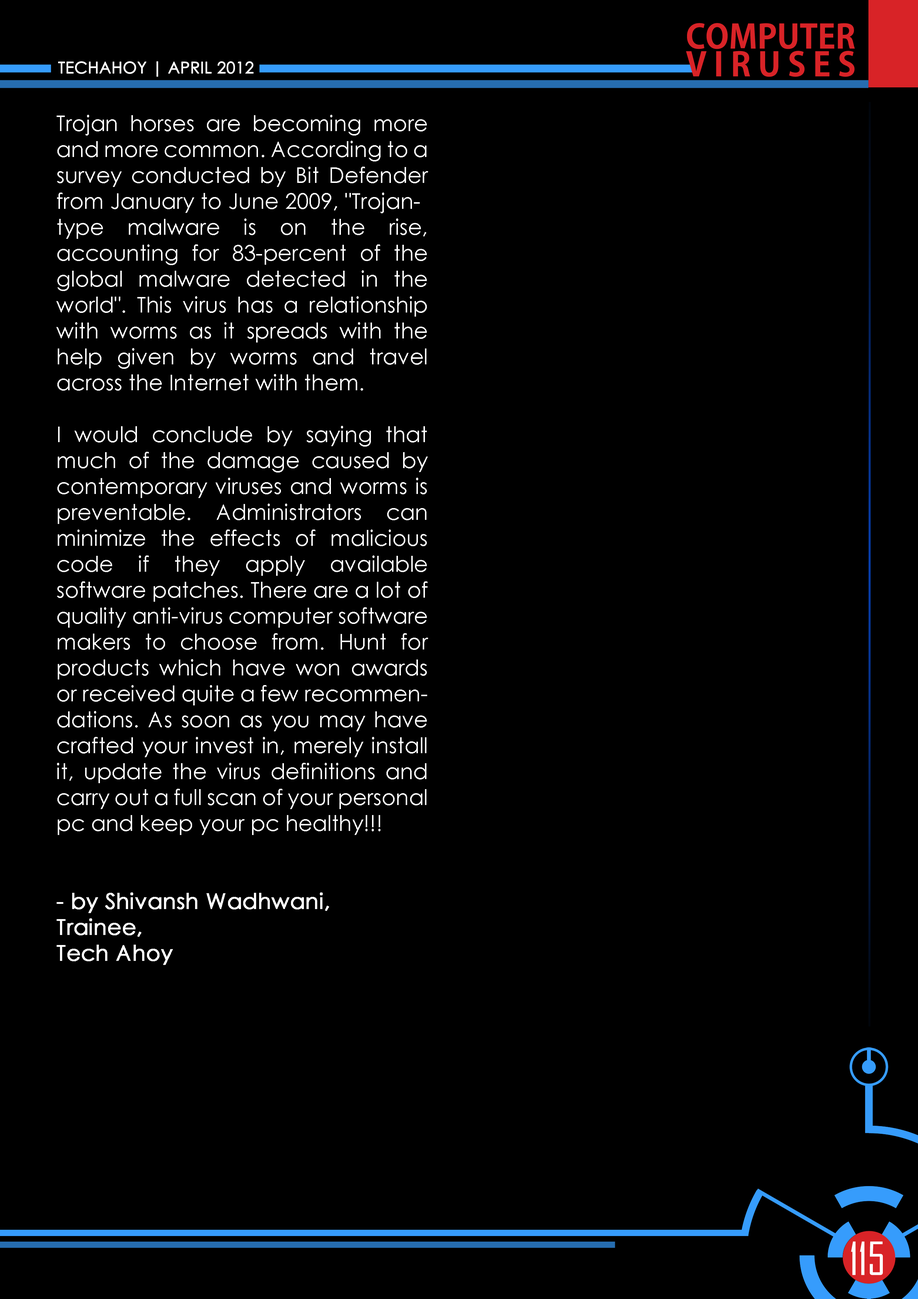
<style>
.page{position:relative;width:918px;height:1299px;background:#000000}
.page>*{position:absolute;margin:0}
.t1{font:32.6px/27.8px "AdobeGothicStd-Bold";color:#d82327;text-transform:uppercase}
.t2{font:32.6px/27.8px "AdobeGothicStd-Bold";letter-spacing:0.22em;color:#d82327;text-transform:uppercase}
.t3{font:16px "CenturyGothic";color:#ffffff;text-transform:uppercase;font-weight:bold}
.t4{font:21.6px "CenturyGothic";color:#ffffff}
.t5{font:21.6px "CenturyGothic";color:#ffffff;font-weight:bold}
.t6{font:43.7px "AgencyFB-Reg";color:#ffffff;text-transform:uppercase}
</style>
<div class="page">
<p class="t1" style="left:686px;top:23px;width:169px;height:54px">Computer <br><span class="t2">Viruses</span></p>
<p class="t3" style="left:58px;top:61px;width:196px;height:16px">techahoy | APRIL 2012</p>
<p class="t4" style="left:56px;top:115px;width:372px;height:850px;text-align:justify">Trojan horses are becoming more and more common. According to a survey conducted by Bit Defender from January to June 2009, "Trojan-type malware is on the rise, accounting for 83-percent of the global malware detected in the world". This virus has a relationship with worms as it spreads with the help given by worms and travel across the Internet with them.<br><br>I would conclude by saying that much of the damage caused by contemporary viruses and worms is preventable. Administrators can minimize the effects of malicious code if they apply available software patches. There are a lot of quality anti-virus computer software makers to choose from. Hunt for products which have won awards or received quite a few recommendations. As soon as you may have crafted your invest in, merely install it, update the virus definitions and carry out a full scan of your personal pc and keep your pc healthy!!!<br><br><br><span class="t5">- by Shivansh Wadhwani,<br>Trainee,<br>Tech Ahoy</span></p>
<p class="t6" style="left:851px;top:1241px;width:32px;height:34px">115</p>
</div>
